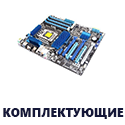
<style>
.page{position:relative;width:125px;height:125px;background:#ffffff}
.page>*{position:absolute;margin:0}
.t1{font:12px "SegoeUIBlack";color:#141738}
</style>
<div class="page">
<p class="t1" style="left:3px;top:108px;width:121px;height:11px">КОМПЛЕКТУЮЩИЕ</p>
</div>
